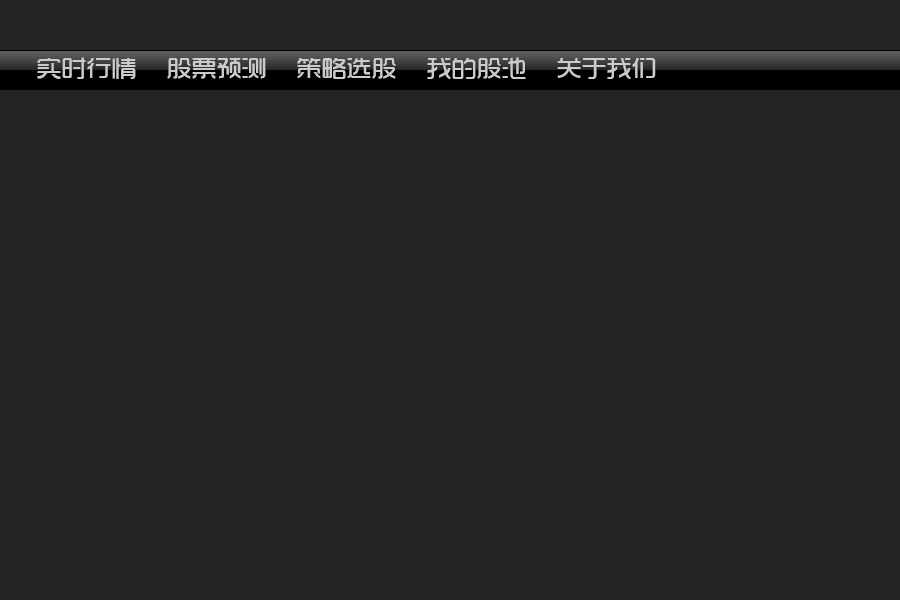
<style>
.page{position:relative;width:900px;height:600px;background:#232323}
.page>*{position:absolute;margin:0}
.t1{font:25px "TRENDS";color:#cbcbcb}
</style>
<div class="page">
<p class="t1" style="left:37px;top:57px;width:99px;height:22px">实时行情</p>
<p class="t1" style="left:167px;top:58px;width:99px;height:21px">股票预测</p>
<p class="t1" style="left:297px;top:58px;width:99px;height:21px">策略选股</p>
<p class="t1" style="left:427px;top:57px;width:99px;height:22px">我的股池</p>
<p class="t1" style="left:557px;top:58px;width:99px;height:21px">关于我们</p>
</div>
